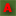
<style>
.page{position:relative;width:16px;height:16px}
.page>*{position:absolute;margin:0}
.t1{font:12px "Tahoma-Bold";color:#fe0000}
</style>
<div class="page">
<p class="t1" style="left:3px;top:3px;width:9px;height:9px">A</p>
</div>
